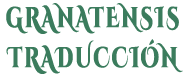
<style>
.page{position:relative;width:183px;height:77px;background:#ffffff}
.page>*{position:absolute;margin:0}
.t1{font:28.8px/40px "CinzelDecorative-Black";letter-spacing:0.1em;color:#3b7c5d;scale:0.67 1}
</style>
<div class="page">
<p class="t1" style="left:6px;top:3px;width:177px;height:71px;text-align:center">GRANATENSIS<br>TRADUCCIÓN</p>
</div>
